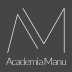
<style>
.page{position:relative;width:72px;height:72px;background:#454545}
.page>*{position:absolute;margin:0}
.t1{font:10.3px "Lato-Light";letter-spacing:-0.075em;color:#ededed}
</style>
<div class="page">
<p class="t1" style="left:6px;top:57px;width:60px;height:8px">Academia Manu</p>
</div>
